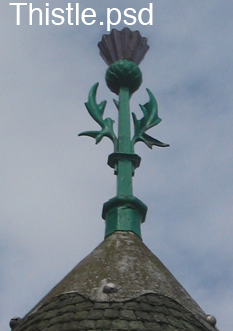
<style>
.page{position:relative;width:233px;height:331px}
.page>*{position:absolute;margin:0}
.t1{font:30px "Helvetica";color:#ffffff}
</style>
<div class="page">
<p class="t1" style="left:9px;top:3px;width:144px;height:28px">Thistle.psd</p>
</div>
